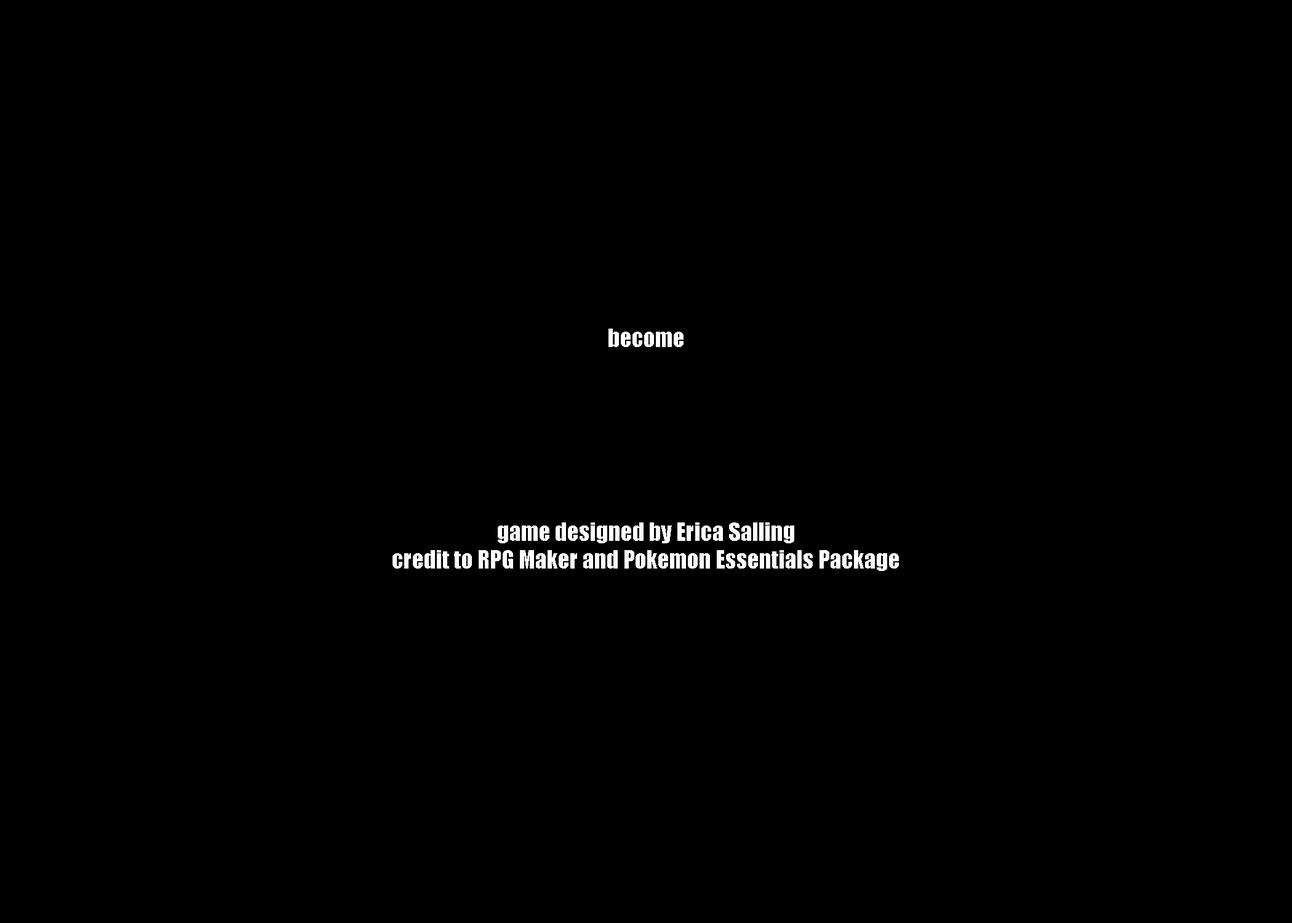
<style>
.page{position:relative;width:1292px;height:923px;background:#000000}
.page>*{position:absolute;margin:0}
.t1{font:23.1px "Impact";color:#fefefe}
</style>
<div class="page">
<p class="t1" style="left:393px;top:329px;width:506px;height:242px;text-align:center">become<br><br><br><br><br><br><br>game designed by Erica Salling<br>credit to RPG Maker and Pokemon Essentials Package</p>
</div>
